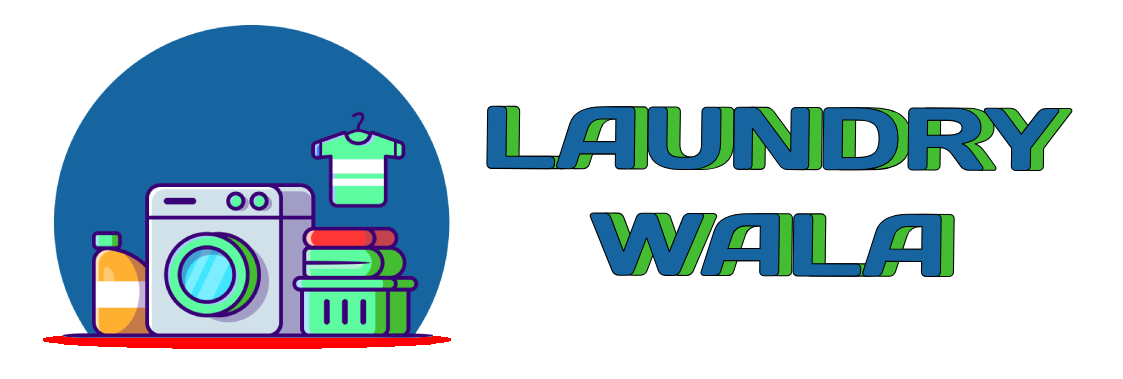
<style>
.page{position:relative;width:1123px;height:379px;background:#ffffff}
.page>*{position:absolute;margin:0}
.t1{font:88.6px "DaysOne-Regular";color:#1665a0;scale:1.16 1}
</style>
<div class="page">
<p class="t1" style="left:485px;top:105px;width:575px;height:173px;text-align:center">LAUNDRY<br>WALA</p>
</div>
